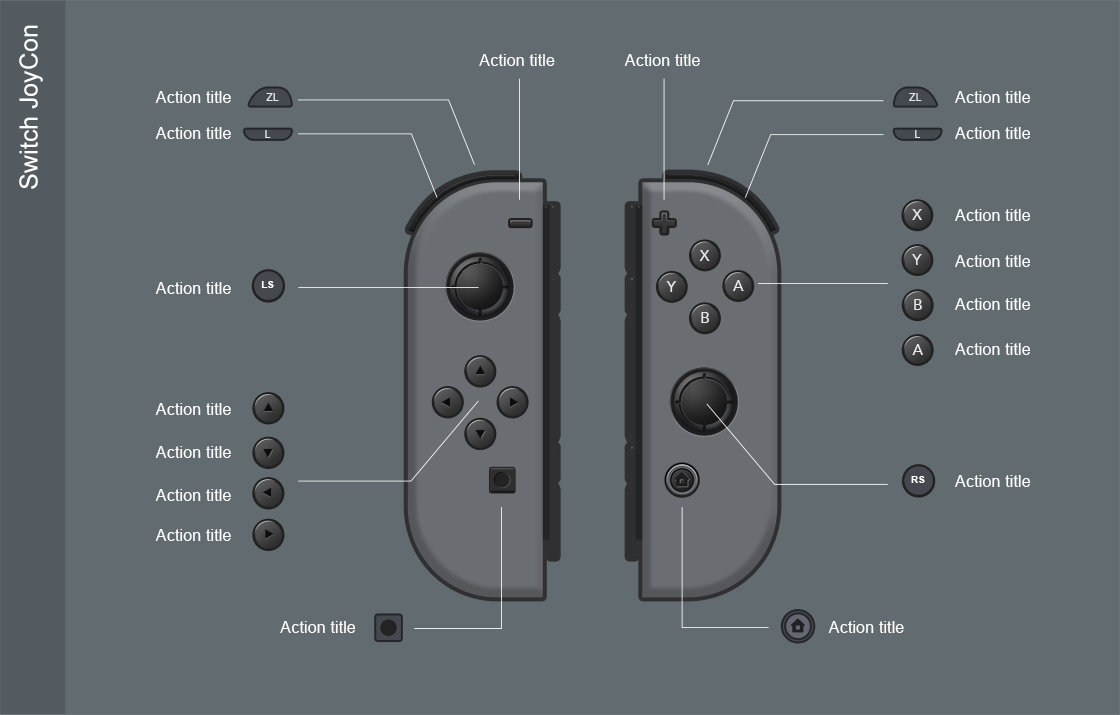
<style>
.page{position:relative;width:1120px;height:715px;background:#626b70}
.page>*{position:absolute;margin:0}
.t1{font:25px "ArialMT";color:#ffffff}
.t2{font:16.4px "ArialMT";color:#ffffff}
.t3{font:10.9px "Avenir-Medium";color:#e7e9eb}
.t4{font:15.5px "Avenir-Medium";color:#e7e9eb}
.t5{font:10.5px "Arial-BoldMT";color:#ffffff}
</style>
<div class="page">
<p class="t1" style="left:19px;top:25px;width:24px;height:164px;rotate:-90deg">Switch JoyCon</p>
<p class="t2" style="left:479px;top:54px;width:76px;height:12px">Action title</p>
<p class="t2" style="left:624px;top:54px;width:76px;height:12px">Action title</p>
<p class="t2" style="left:155px;top:91px;width:76px;height:12px">Action title</p>
<p class="t3" style="left:266px;top:93px;width:13px;height:8px">ZL</p>
<p class="t3" style="left:909px;top:93px;width:13px;height:8px">ZL</p>
<p class="t2" style="left:955px;top:91px;width:76px;height:12px">Action title</p>
<p class="t2" style="left:155px;top:127px;width:76px;height:12px">Action title</p>
<p class="t3" style="left:265px;top:130px;width:6px;height:8px">L</p>
<p class="t3" style="left:915px;top:130px;width:5px;height:8px">L</p>
<p class="t2" style="left:955px;top:127px;width:76px;height:12px">Action title</p>
<p class="t4" style="left:912px;top:209px;width:10px;height:11px">X</p>
<p class="t2" style="left:955px;top:209px;width:76px;height:12px">Action title</p>
<p class="t4" style="left:699px;top:250px;width:11px;height:11px">X</p>
<p class="t4" style="left:912px;top:254px;width:10px;height:11px">Y</p>
<p class="t2" style="left:955px;top:255px;width:76px;height:12px">Action title</p>
<p class="t5" style="left:261px;top:281px;width:13px;height:7px">LS</p>
<p class="t4" style="left:666px;top:281px;width:11px;height:11px">Y</p>
<p class="t4" style="left:733px;top:280px;width:11px;height:11px">A</p>
<p class="t2" style="left:155px;top:282px;width:76px;height:12px">Action title</p>
<p class="t4" style="left:914px;top:299px;width:8px;height:11px">B</p>
<p class="t2" style="left:955px;top:298px;width:76px;height:12px">Action title</p>
<p class="t4" style="left:701px;top:312px;width:8px;height:11px">B</p>
<p class="t4" style="left:912px;top:344px;width:11px;height:11px">A</p>
<p class="t2" style="left:955px;top:343px;width:76px;height:12px">Action title</p>
<p class="t2" style="left:155px;top:403px;width:76px;height:12px">Action title</p>
<p class="t2" style="left:155px;top:446px;width:76px;height:12px">Action title</p>
<p class="t5" style="left:911px;top:476px;width:14px;height:7px">RS</p>
<p class="t2" style="left:955px;top:475px;width:76px;height:12px">Action title</p>
<p class="t2" style="left:155px;top:489px;width:76px;height:12px">Action title</p>
<p class="t2" style="left:155px;top:529px;width:76px;height:12px">Action title</p>
<p class="t2" style="left:280px;top:621px;width:76px;height:12px">Action title</p>
<p class="t2" style="left:828px;top:621px;width:76px;height:12px">Action title</p>
</div>
